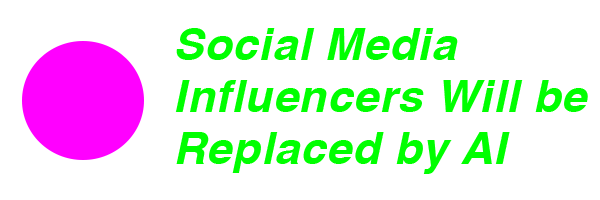
<style>
.page{position:relative;width:600px;height:200px;background:#ffffff}
.page>*{position:absolute;margin:0}
.t1{font:45px/52px "Helvetica-BoldOblique";letter-spacing:0.02em;color:#00ff00}
</style>
<div class="page">
<p class="t1" style="left:175px;top:28px;width:413px;height:146px">Social Media Influencers Will be Replaced by AI Influencers</p>
</div>
